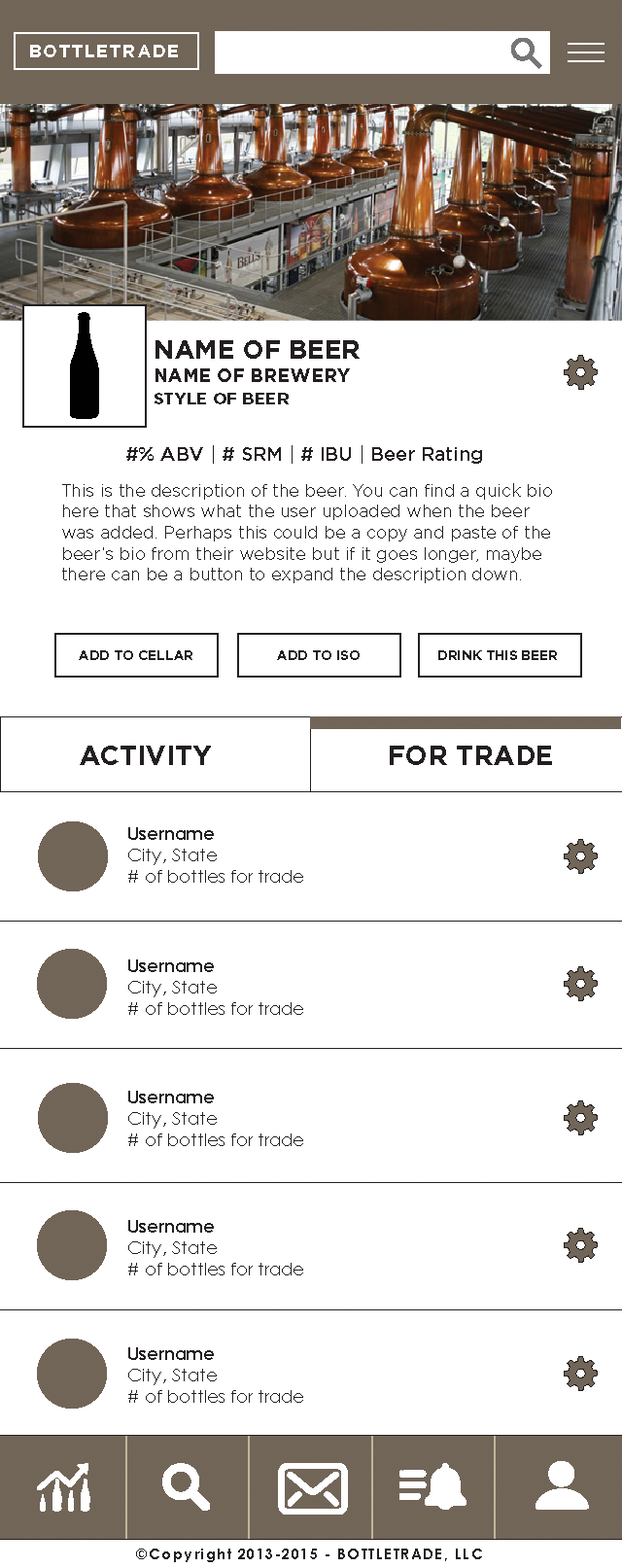
<style>
.page{position:relative;width:622px;height:1568px;background:#ffffff}
.page>*{position:absolute;margin:0}
.t1{font:17.5px "Gotham-Bold";letter-spacing:0.099em;color:#ffffff}
.t2{font:26.3px "Gotham-Bold";color:#231f20}
.t3{font:18.5px "Gotham-Bold";color:#231f20}
.t4{font:16.6px "Gotham-Bold";color:#231f20}
.t5{font:19.4px "Gotham-Medium";color:#231f20}
.t6{font:17.5px "Gotham-Book";color:#231f20}
.t7{font:13.6px "Gotham-Bold";color:#231f20}
.t8{font:27.2px "Gotham-Bold";color:#231f20}
.t9{font:17.5px "CenturyGothic";color:#231f20}
.t10{font:17.5px "CenturyGothic-Bold";color:#231f20}
.t11{font:14.6px "CenturyGothic-Bold";letter-spacing:0.099em;color:#231f20}
</style>
<div class="page">
<p class="t1" style="left:30px;top:45px;width:148px;height:12px">BOTTLETRADE</p>
<p class="t2" style="left:156px;top:340px;width:204px;height:19px">NAME OF BEER</p>
<p class="t3" style="left:156px;top:368px;width:194px;height:14px">NAME OF BREWERY</p>
<p class="t4" style="left:155px;top:393px;width:134px;height:11px">STYLE OF BEER</p>
<p class="t5" style="left:126px;top:445px;width:356px;height:19px">#% ABV | # SRM | # IBU | Beer Rating</p>
<p class="t6" style="left:62px;top:483px;width:490px;height:100px">This is the description of the beer. You can find a quick bio here that shows what the user uploaded when the beer was added. Perhaps this could be a copy and paste of the beer’s bio from their website but if it goes longer, maybe there can be a button to expand the description down.</p>
<p class="t7" style="left:79px;top:650px;width:113px;height:10px">ADD TO CELLAR</p>
<p class="t7" style="left:277px;top:650px;width:83px;height:10px">ADD TO ISO</p>
<p class="t7" style="left:438px;top:650px;width:119px;height:10px">DRINK THIS BEER</p>
<p class="t8" style="left:80px;top:746px;width:131px;height:19px">ACTIVITY</p>
<p class="t8" style="left:390px;top:746px;width:162px;height:19px">FOR TRADE</p>
<p class="t9" style="left:128px;top:827px;width:175px;height:56px"><span class="t10">Username</span><br>City, State<br># of bottles for trade</p>
<p class="t9" style="left:128px;top:959px;width:175px;height:56px"><span class="t10">Username</span><br>City, State<br># of bottles for trade</p>
<p class="t9" style="left:128px;top:1091px;width:175px;height:55px"><span class="t10">Username</span><br>City, State<br># of bottles for trade</p>
<p class="t9" style="left:128px;top:1220px;width:175px;height:55px"><span class="t10">Username</span><br>City, State<br># of bottles for trade</p>
<p class="t9" style="left:128px;top:1347px;width:175px;height:56px"><span class="t10">Username</span><br>City, State<br># of bottles for trade</p>
<p class="t11" style="left:136px;top:1549px;width:346px;height:13px">©Copyright 2013-2015 - BOTTLETRADE, LLC</p>
</div>
